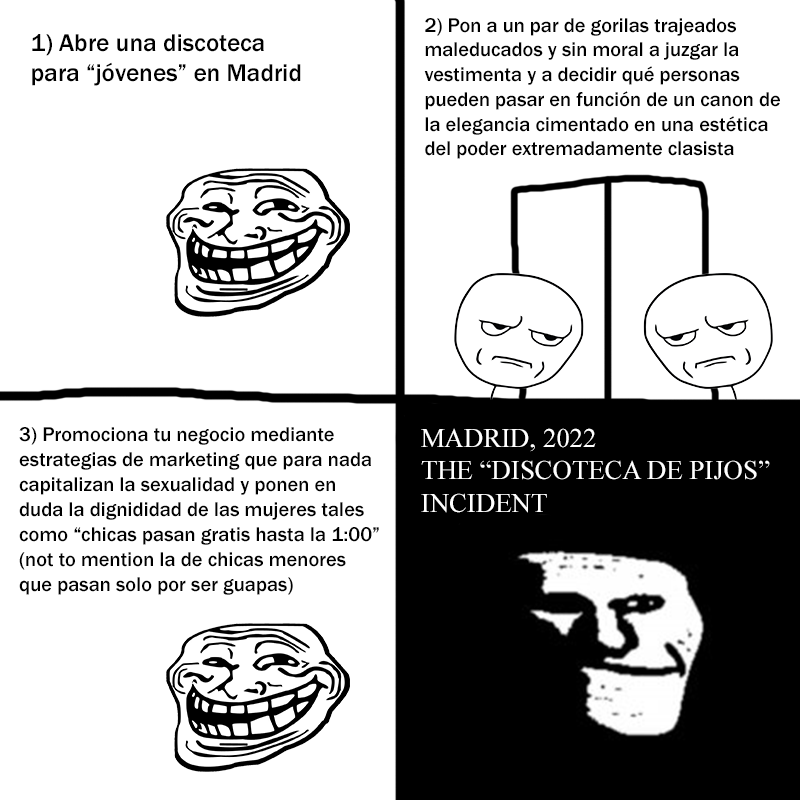
<style>
.page{position:relative;width:800px;height:800px;background:#ffffff}
.page>*{position:absolute;margin:0}
.t1{font:20.4px "FranklinGothic-Medium";color:#000000}
.t2{font:25.2px "FranklinGothic-Medium";color:#000000}
.t3{font:20.5px "FranklinGothic-Medium";color:#000000}
.t4{font:26.8px "TimesNewRomanPSMT";color:#ffffff}
</style>
<div class="page">
<p class="t1" style="left:424px;top:18px;width:356px;height:141px">2) Pon a un par de gorilas trajeados<br>maleducados y sin moral a juzgar la<br>vestimenta y a decidir qué personas<br>pueden pasar en función de un canon de<br>la elegancia cimentado en una estética<br>del poder extremadamente clasista</p>
<p class="t2" style="left:32px;top:34px;width:269px;height:52px">1) Abre una discoteca<br>para “jóvenes” en Madrid</p>
<p class="t3" style="left:19px;top:427px;width:360px;height:168px">3) Promociona tu negocio mediante<br>estrategias de marketing que para nada<br>capitalizan la sexualidad y ponen en<br>duda la dignididad de las mujeres tales<br>como “chicas pasan gratis hasta la 1:00”<br>(not to mention la de chicas menores<br>que pasan solo por ser guapas)</p>
<p class="t4" style="left:421px;top:428px;width:349px;height:85px">MADRID, 2022<br>THE “DISCOTECA DE PIJOS”<br>INCIDENT</p>
</div>
